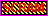
<style>
.page{position:relative;width:48px;height:16px;background:#000000}
.page>*{position:absolute;margin:0}
.t1{font:12px "Arial-BoldMT";color:#ff0000}
</style>
<div class="page">
<p class="t1" style="left:3px;top:3px;width:41px;height:9px">SCRAM</p>
</div>
